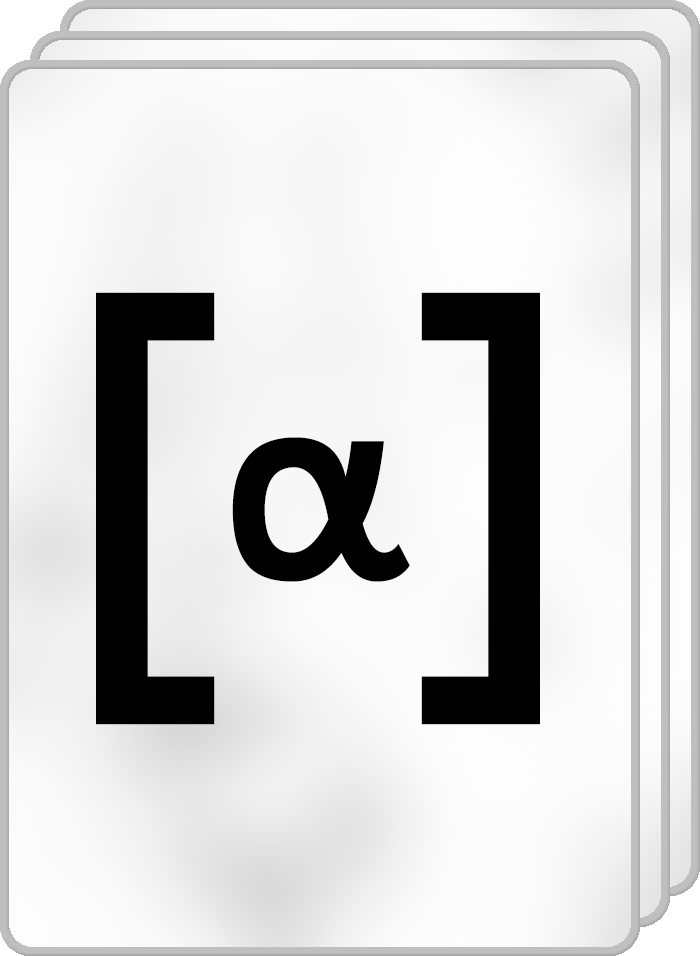
<style>
.page{position:relative;width:700px;height:956px}
.page>*{position:absolute;margin:0}
.t1{font:468.5px "Cadman-Bold";letter-spacing:0.003em;color:#000000;scale:0.94 1}
.t2{font:265.6px "Cadman-Bold";letter-spacing:0.003em;color:#000000;scale:0.94 1}
</style>
<div class="page">
<p class="t1" style="left:96px;top:292px;width:119px;height:433px">[</p>
<p class="t1" style="left:421px;top:292px;width:119px;height:433px;rotate:180deg">[</p>
<p class="t2" style="left:232px;top:437px;width:178px;height:145px">α</p>
</div>
